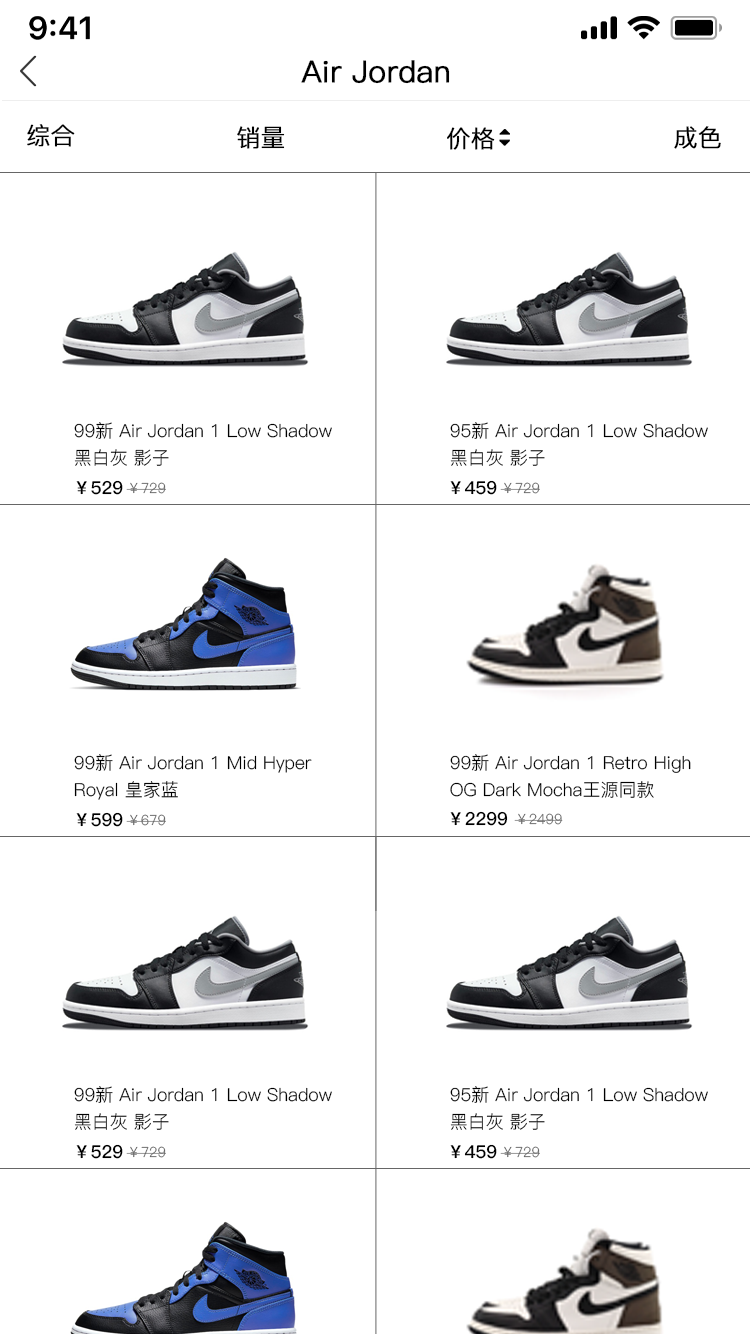
<style>
.page{position:relative;width:750px;height:1334px;background:#ffffff}
.page>*{position:absolute;margin:0}
.t1{font:30px "PingFang-SC-Regular";color:#000000;font-weight:bold}
.t2{font:24px "PingFang-SC-Regular";color:#000000;font-weight:bold}
.t3{font:18px/27px "PingFang-SC-Regular";color:#000000}
.t4{font:18px "PingFang-SC-Bold";color:#000000}
.t5{font:14px "PingFang-SC-Regular";color:#666666}
</style>
<div class="page">
<p class="t1" style="left:301px;top:60px;width:149px;height:24px">Air Jordan</p>
<p class="t2" style="left:27px;top:124px;width:48px;height:23px">综合</p>
<p class="t2" style="left:237px;top:126px;width:48px;height:23px">销量</p>
<p class="t2" style="left:674px;top:126px;width:47px;height:23px">成色</p>
<p class="t2" style="left:447px;top:127px;width:48px;height:23px">价格</p>
<p class="t3" style="left:74px;top:422px;width:258px;height:44px">99新 Air Jordan 1 Low Shadow<br>黑白灰 影子</p>
<p class="t3" style="left:450px;top:422px;width:258px;height:44px">95新 Air Jordan 1 Low Shadow<br>黑白灰 影子</p>
<p class="t4" style="left:76px;top:480px;width:47px;height:15px">￥529</p>
<p class="t5" style="left:126px;top:482px;width:40px;height:12px">￥729</p>
<p class="t4" style="left:450px;top:480px;width:47px;height:15px">￥459</p>
<p class="t5" style="left:500px;top:482px;width:40px;height:12px">￥729</p>
<p class="t3" style="left:74px;top:754px;width:238px;height:46px">99新 Air Jordan 1 Mid Hyper<br>Royal 皇家蓝</p>
<p class="t3" style="left:450px;top:754px;width:241px;height:44px">99新 Air Jordan 1 Retro High <br>OG Dark Mocha王源同款</p>
<p class="t4" style="left:76px;top:812px;width:47px;height:15px">￥599</p>
<p class="t5" style="left:126px;top:814px;width:40px;height:12px">￥679</p>
<p class="t4" style="left:450px;top:811px;width:58px;height:15px">￥2299</p>
<p class="t5" style="left:514px;top:813px;width:49px;height:12px">￥2499</p>
<p class="t3" style="left:74px;top:1086px;width:258px;height:44px">99新 Air Jordan 1 Low Shadow<br>黑白灰 影子</p>
<p class="t3" style="left:450px;top:1086px;width:258px;height:44px">95新 Air Jordan 1 Low Shadow<br>黑白灰 影子</p>
<p class="t4" style="left:76px;top:1144px;width:47px;height:15px">￥529</p>
<p class="t4" style="left:450px;top:1144px;width:47px;height:15px">￥459</p>
<p class="t5" style="left:126px;top:1146px;width:40px;height:12px">￥729</p>
<p class="t5" style="left:500px;top:1146px;width:40px;height:12px">￥729</p>
</div>
